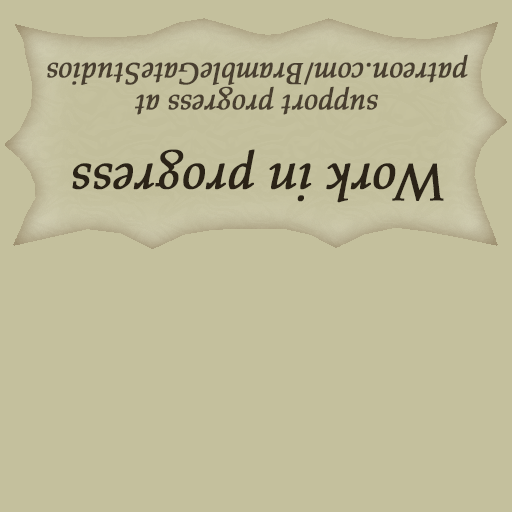
<style>
.page{position:relative;width:512px;height:512px;background:#c4c09d}
.page>*{position:absolute;margin:0}
.t1{font:30px/32px "PalatinoLinotype-Italic";letter-spacing:-0.01em;color:#493f30;font-weight:bold}
.t2{font:52px "PalatinoLinotype-Italic";letter-spacing:-0.01em;color:#2b2317;font-weight:bold}
</style>
<div class="page">
<p class="t1" style="left:47px;top:54px;width:421px;height:61px;text-align:center;rotate:180deg">support progress at<br>patreon.com/BrambleGateStudios</p>
<p class="t2" style="left:72px;top:149px;width:372px;height:54px;rotate:180deg">Work in progress</p>
</div>
